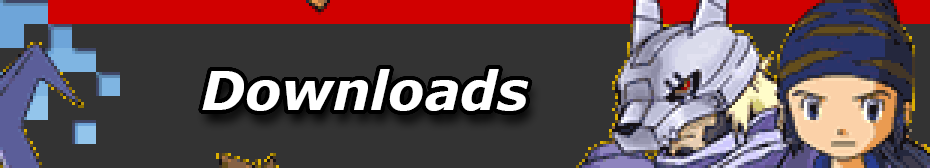
<style>
.page{position:relative;width:930px;height:168px;background:#333333}
.page>*{position:absolute;margin:0}
.t1{font:52.9px "Verdana-BoldItalic";color:#ffffff}
</style>
<div class="page">
<p class="t1" style="left:202px;top:69px;width:327px;height:42px">Downloads</p>
</div>
